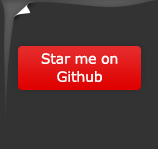
<style>
.page{position:relative;width:158px;height:149px;background:#333333}
.page>*{position:absolute;margin:0}
.t1{font:14px/18px "Verdana";letter-spacing:-0.01em;color:#ffffff}
</style>
<div class="page">
<p class="t1" style="left:41px;top:53px;width:77px;height:29px;text-align:center">Star me on<br>Github</p>
</div>
